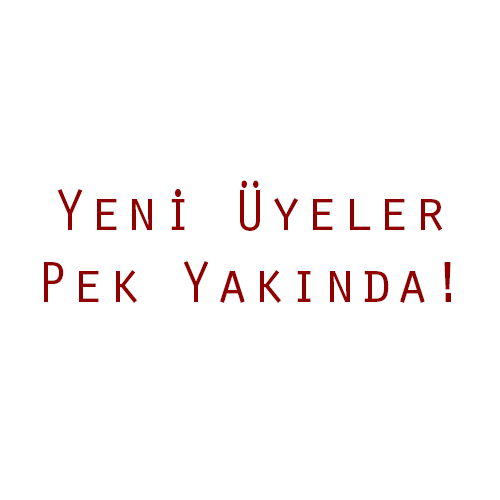
<style>
.page{position:relative;width:500px;height:500px;background:#ffffff}
.page>*{position:absolute;margin:0}
.t1{font:60px "OratorStd";color:#910000}
</style>
<div class="page">
<p class="t1" style="left:44px;top:180px;width:407px;height:123px;text-align:center">Yenı Üyeler<br>Pek Yakında!</p>
</div>
